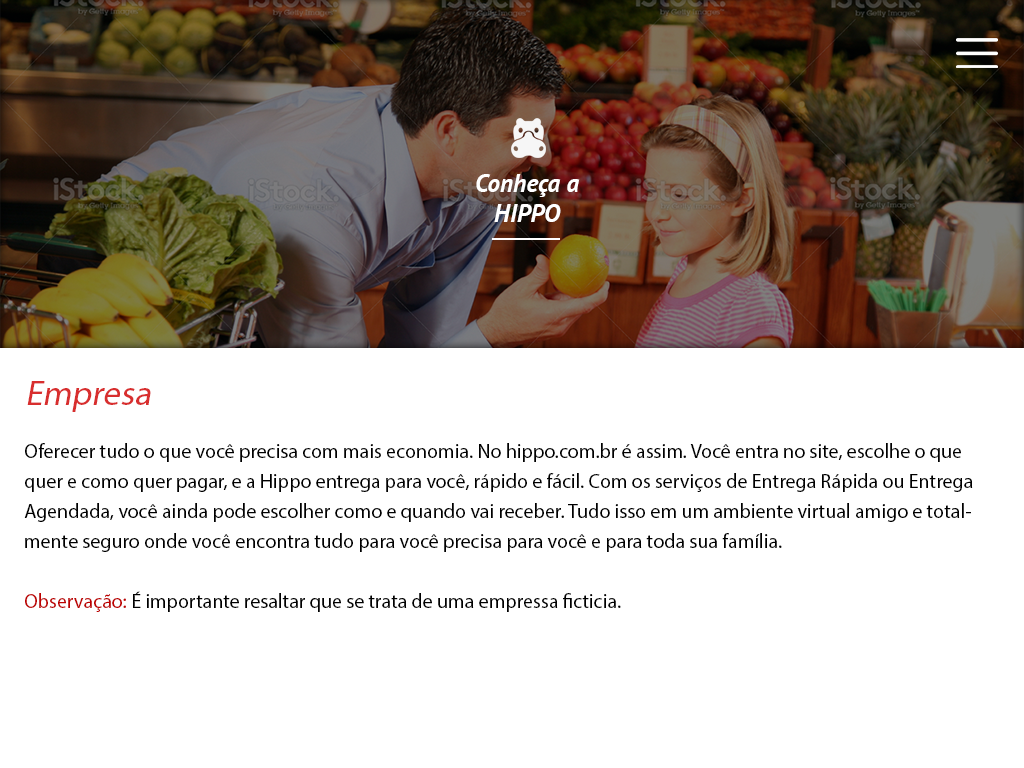
<style>
.page{position:relative;width:1024px;height:768px;background:#ffffff}
.page>*{position:absolute;margin:0}
.t1{font:25px "PTSans-BoldItalic";color:#ffffff}
.t2{font:35px "MyriadPro-Regular";color:#d82e2e;font-style:italic}
.t3{font:20px/30px "MyriadPro-Regular";color:#000000}
.t4{font:20px/30px "MyriadPro-Regular";color:#bd0100}
</style>
<div class="page">
<p class="t1" style="left:476px;top:174px;width:104px;height:48px;text-align:center">Conheça a<br>HIPPO</p>
<p class="t2" style="left:27px;top:381px;width:124px;height:31px">Empresa</p>
<p class="t3" style="left:24px;top:443px;width:949px;height:169px">Oferecer tudo o que você precisa com mais economia. No hippo.com.br é assim. Você entra no site, escolhe o que quer e como quer pagar, e a Hippo entrega para você, rápido e fácil. Com os serviços de Entrega Rápida ou Entrega Agendada, você ainda pode escolher como e quando vai receber. Tudo isso em um ambiente virtual amigo e totalmente seguro onde você encontra tudo para você precisa para você e para toda sua família.<br><span class="t4"><br>Observação:</span> É importante resaltar que se trata de uma empressa ficticia.</p>
</div>
